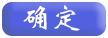
<style>
.page{position:relative;width:108px;height:38px}
.page>*{position:absolute;margin:0}
.t1{font:30px "STXinwei";color:#ffffff}
</style>
<div class="page">
<p class="t1" style="left:23px;top:5px;width:57px;height:26px">确定</p>
</div>
